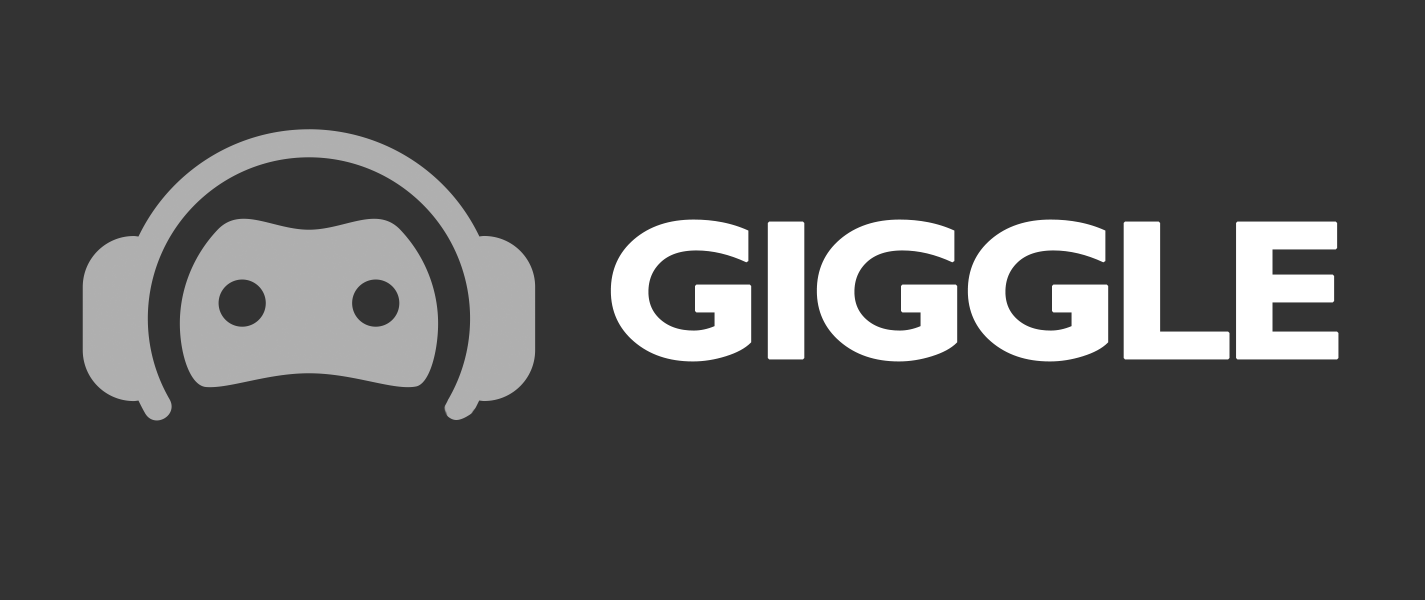
<style>
.page{position:relative;width:1425px;height:600px;background:#333333}
.page>*{position:absolute;margin:0}
.t1{font:198.3px "GillSansMT-Bold";letter-spacing:-0.08em;color:#ffffff;font-weight:bold}
</style>
<div class="page">
<p class="t1" style="left:610px;top:219px;width:729px;height:143px">GIGGLE</p>
</div>
